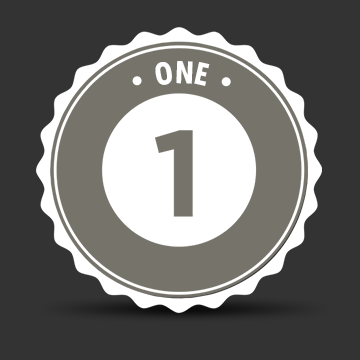
<style>
.page{position:relative;width:360px;height:360px;background:#333333}
.page>*{position:absolute;margin:0}
.t1{font:36.3px "TwCenMT-CondensedBold";letter-spacing:-0.04em;color:#ffffff;text-transform:uppercase}
</style>
<div class="page">
<p class="t1" style="left:155px;top:61px;width:55px;height:25px">ONE</p>
</div>
